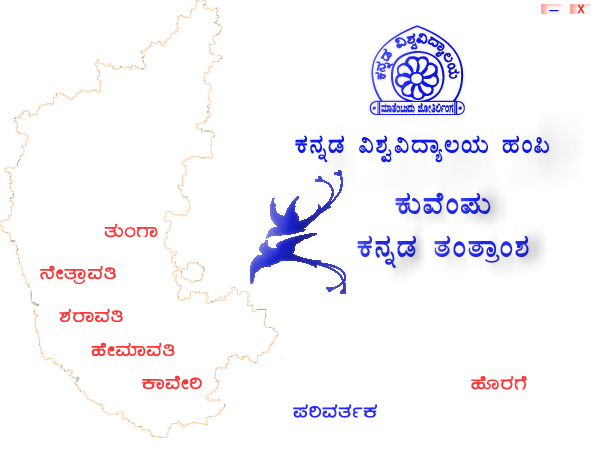
<style>
.page{position:relative;width:600px;height:450px;background:#ffffff}
.page>*{position:absolute;margin:0}
.t1{font:13px "Calibri";color:#ff1301}
.t2{font:18px "Calibri";color:#0415f9}
.t3{font:125.6px "AA"}
.t4{font:30px "Kuvempu_Eng_0003";color:#0d18eb}
.t5{font:36px "Kuvempu_Eng_0003";color:#1d27ec}
.t6{font:22px "Kuvempu_Eng_0006";color:#fe3534}
.t7{font:22px "Kuvempu_Eng_0006";color:#2429ff}
</style>
<div class="page">
<p class="t1" style="left:577px;top:4px;width:8px;height:10px">X</p>
<p class="t2" style="left:549px;top:10px;width:10px;height:2px">_</p>
<p class="t3" style="left:369px;top:25px;width:96px;height:90px">A</p>
<p class="t4" style="left:295px;top:135px;width:254px;height:28px">PÀ£ÀßqÀ «±Àé«zÁå®AiÀÄ ºÀA¦</p>
<p class="t5" style="left:357px;top:192px;width:172px;height:76px;text-align:center">PÀÄªÉA¥ÀÄ <br>PÀ£ÀßqÀ vÀAvÁæA±À</p>
<p class="t6" style="left:104px;top:223px;width:54px;height:15px">vÀÄAUÁ</p>
<p class="t6" style="left:40px;top:265px;width:76px;height:19px">£ÉÃvÁæªÀw</p>
<p class="t6" style="left:59px;top:308px;width:64px;height:15px">±ÀgÁªÀw</p>
<p class="t6" style="left:91px;top:342px;width:84px;height:15px">ºÉÃªÀiÁªÀw</p>
<p class="t6" style="left:142px;top:375px;width:60px;height:15px">PÁªÉÃj</p>
<p class="t6" style="left:471px;top:376px;width:56px;height:14px">ºÉÆgÀUÉ</p>
<p class="t7" style="left:293px;top:404px;width:84px;height:14px">¥ÀjªÀvÀðPÀ</p>
</div>
